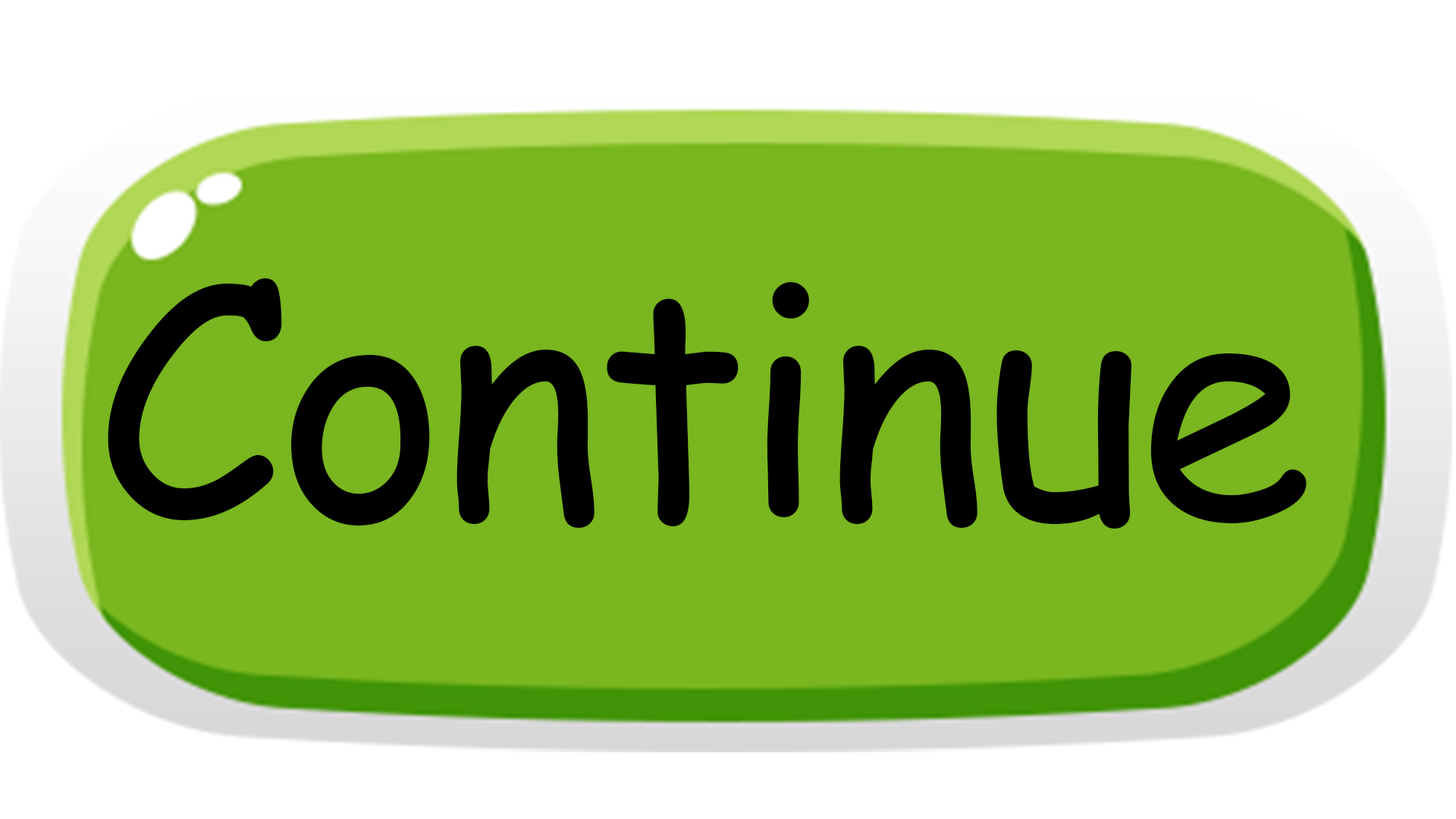
<style>
.page{position:relative;width:1456px;height:819px;background:#79b61f}
.page>*{position:absolute;margin:0}
.t1{font:319.2px "ComicSansMS";letter-spacing:-0.025em;color:#000000}
</style>
<div class="page">
<p class="t1" style="left:108px;top:278px;width:1199px;height:251px">Continue</p>
</div>
